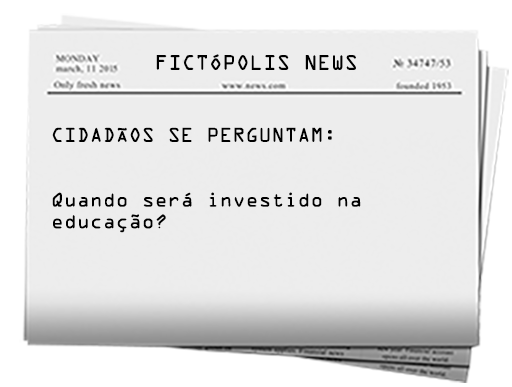
<style>
.page{position:relative;width:512px;height:387px;background:#ededed}
.page>*{position:absolute;margin:0}
.t1{font:18.8px "OCRAStd";color:#000000}
.t2{font:18px "OCRAStd";color:#000000}
</style>
<div class="page">
<p class="t1" style="left:156px;top:54px;width:200px;height:16px">FICTÓPOLIS NEWS</p>
<p class="t2" style="left:52px;top:127px;width:309px;height:106px">CIDADÃOS SE PERGUNTAM:<br><br><br>Quando será investido na <br>educação?</p>
</div>
